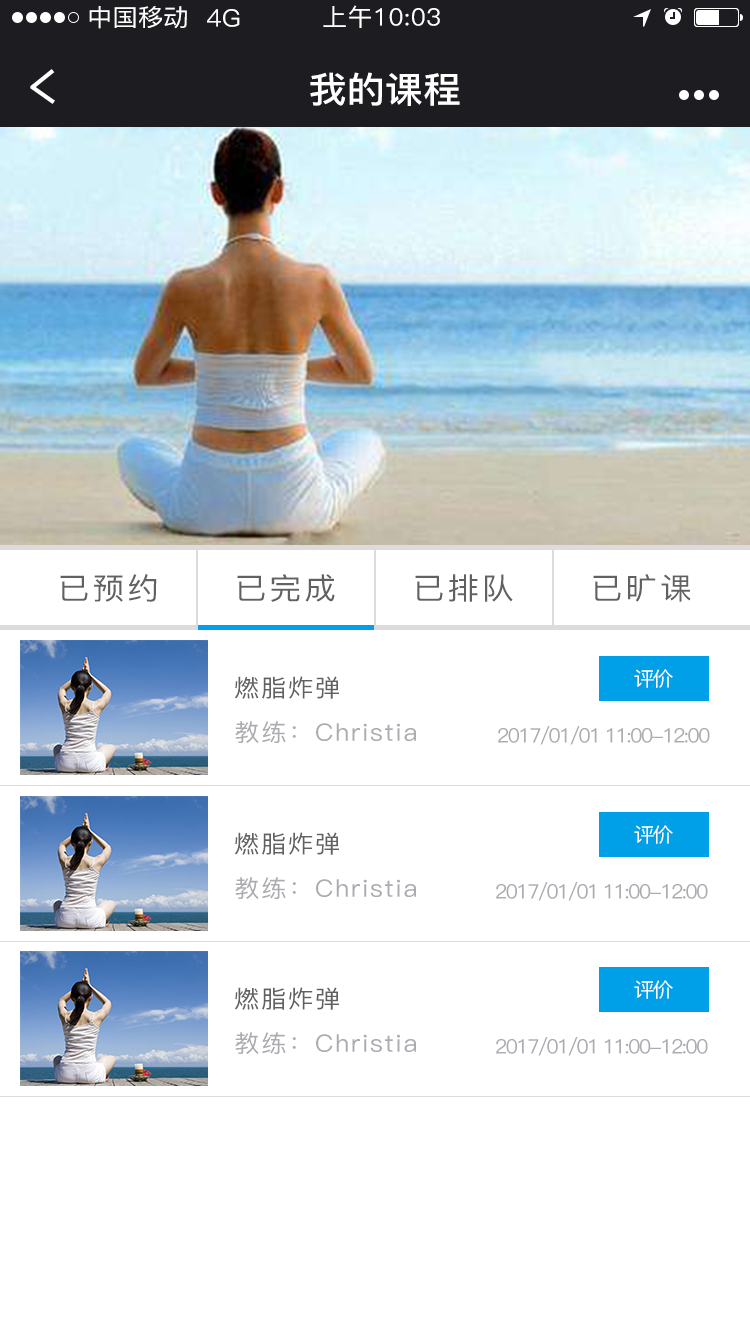
<style>
.page{position:relative;width:750px;height:1334px;background:#ffffff}
.page>*{position:absolute;margin:0}
.t1{font:24px "PingFang-SC-Medium";letter-spacing:0.01em;color:#ffffff;scale:1.05 1}
.t2{font:36px "PingFang-SC-Bold";letter-spacing:0.01em;color:#ffffff;scale:1.05 1}
.t3{font:30px "PingFang-SC-Medium";letter-spacing:0.1em;color:#626060;scale:1.05 1}
.t4{font:24px "PingFang-SC-Medium";letter-spacing:0.07em;color:#626060;scale:1.05 1}
.t5{font:20px "PingFang-SC-Medium";letter-spacing:-0.09em;color:#ffffff;scale:1.05 1}
.t6{font:24px "PingFang-SC-Medium";letter-spacing:0.07em;color:#acabb1;scale:1.05 1}
.t7{font:20px "PingFang-SC-Medium";letter-spacing:-0.09em;color:#acabb1;scale:1.05 1}
</style>
<div class="page">
<p class="t1" style="left:89px;top:6px;width:98px;height:23px">中国移动</p>
<p class="t1" style="left:323px;top:5px;width:117px;height:23px">上午10:03</p>
<p class="t1" style="left:207px;top:9px;width:33px;height:18px">4G</p>
<p class="t2" style="left:310px;top:72px;width:150px;height:34px">我的课程</p>
<p class="t3" style="left:60px;top:574px;width:97px;height:28px">已预约</p>
<p class="t3" style="left:237px;top:574px;width:98px;height:28px">已完成</p>
<p class="t3" style="left:415px;top:574px;width:98px;height:28px">已排队</p>
<p class="t3" style="left:593px;top:574px;width:98px;height:28px">已旷课</p>
<p class="t4" style="left:234px;top:676px;width:105px;height:23px">燃脂炸弹</p>
<p class="t5" style="left:634px;top:669px;width:39px;height:19px">评价</p>
<p class="t6" style="left:235px;top:721px;width:181px;height:22px">教练：Christia</p>
<p class="t7" style="left:498px;top:726px;width:212px;height:19px">2017/01/01 11:00-12:00</p>
<p class="t4" style="left:234px;top:832px;width:105px;height:23px">燃脂炸弹</p>
<p class="t5" style="left:634px;top:825px;width:39px;height:19px">评价</p>
<p class="t6" style="left:235px;top:877px;width:181px;height:22px">教练：Christia</p>
<p class="t7" style="left:496px;top:882px;width:212px;height:19px">2017/01/01 11:00-12:00</p>
<p class="t4" style="left:234px;top:987px;width:105px;height:23px">燃脂炸弹</p>
<p class="t5" style="left:634px;top:980px;width:39px;height:19px">评价</p>
<p class="t6" style="left:235px;top:1032px;width:181px;height:22px">教练：Christia</p>
<p class="t7" style="left:496px;top:1037px;width:212px;height:19px">2017/01/01 11:00-12:00</p>
</div>
